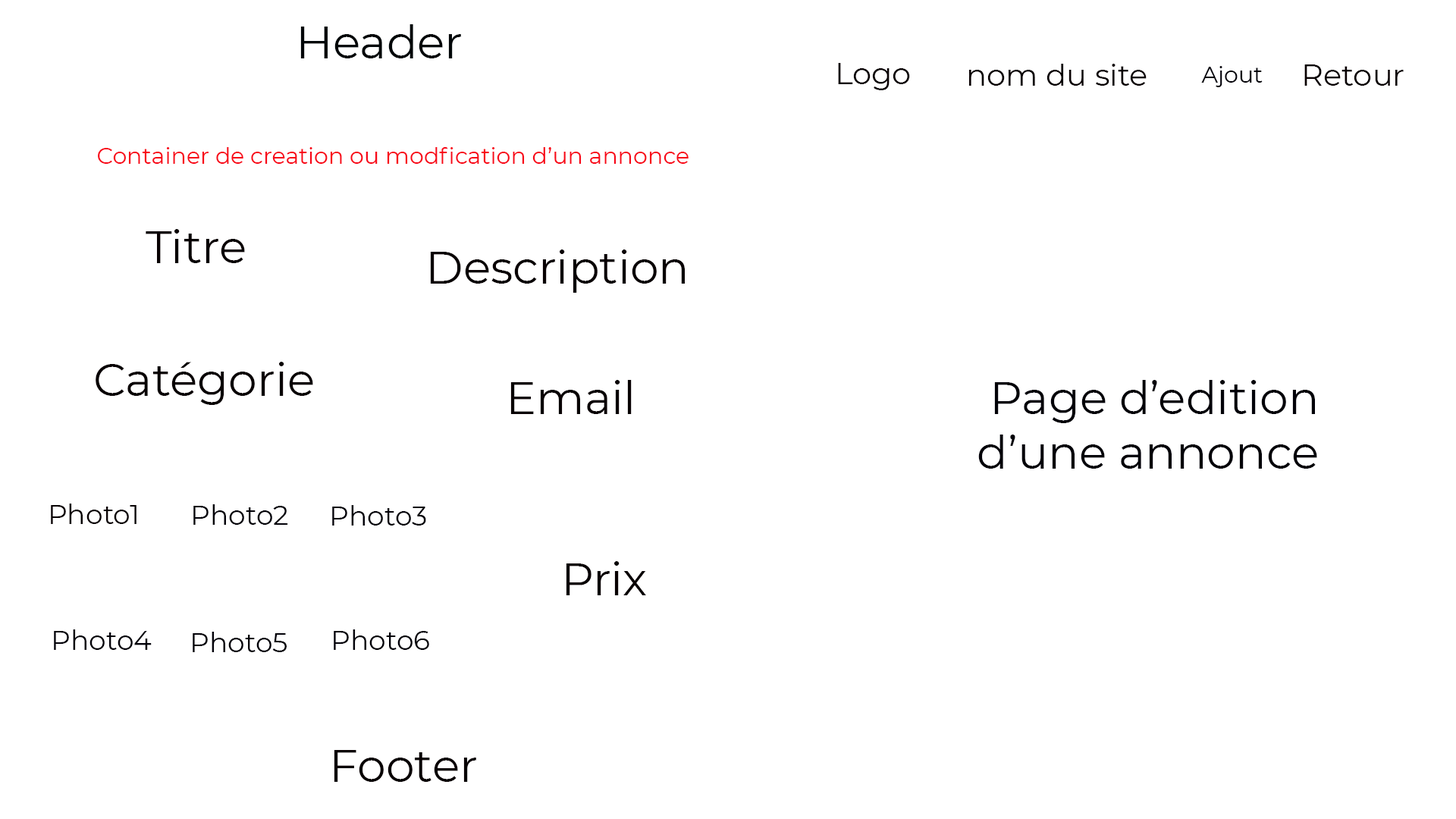
<style>
.page{position:relative;width:1456px;height:819px;background:#ffffff}
.page>*{position:absolute;margin:0}
.t1{font:45.5px "Montserrat-Regular";color:#000608}
.t2{font:30.3px "Montserrat-Regular";color:#080002}
.t3{font:22.7px "Montserrat-Regular";color:#010008}
.t4{font:22.7px "Montserrat-Regular";color:#f80718}
.t5{font:45.5px "Montserrat-Regular";color:#080002}
.t6{font:45.5px "Montserrat-Regular";color:#010008}
.t7{font:27.3px "Montserrat-Regular";color:#080002}
.t8{font:27.3px "Montserrat-Regular";color:#010008}
</style>
<div class="page">
<p class="t1" style="left:300px;top:24px;width:161px;height:34px">Header</p>
<p class="t2" style="left:838px;top:63px;width:72px;height:27px">Logo</p>
<p class="t2" style="left:969px;top:64px;width:178px;height:22px">nom du site</p>
<p class="t3" style="left:1201px;top:66px;width:62px;height:21px">Ajout</p>
<p class="t2" style="left:1304px;top:64px;width:100px;height:22px">Retour</p>
<p class="t4" style="left:98px;top:147px;width:591px;height:17px">Container de creation ou modfication d’un annonce</p>
<p class="t5" style="left:146px;top:229px;width:99px;height:34px">Titre</p>
<p class="t5" style="left:430px;top:249px;width:255px;height:44px">Description</p>
<p class="t5" style="left:96px;top:362px;width:217px;height:43px">Catégorie</p>
<p class="t5" style="left:510px;top:380px;width:122px;height:34px">Email</p>
<p class="t6" style="left:978px;top:380px;width:339px;height:89px;text-align:right">Page d’edition <br>d’une annonce</p>
<p class="t7" style="left:51px;top:504px;width:85px;height:20px">Photo1</p>
<p class="t8" style="left:193px;top:504px;width:95px;height:21px">Photo2</p>
<p class="t8" style="left:332px;top:505px;width:94px;height:21px">Photo3</p>
<p class="t5" style="left:566px;top:561px;width:80px;height:34px">Prix</p>
<p class="t8" style="left:54px;top:629px;width:98px;height:21px">Photo4</p>
<p class="t8" style="left:334px;top:629px;width:95px;height:21px">Photo6</p>
<p class="t8" style="left:193px;top:632px;width:94px;height:20px">Photo5</p>
<p class="t5" style="left:334px;top:750px;width:142px;height:32px">Footer</p>
</div>
